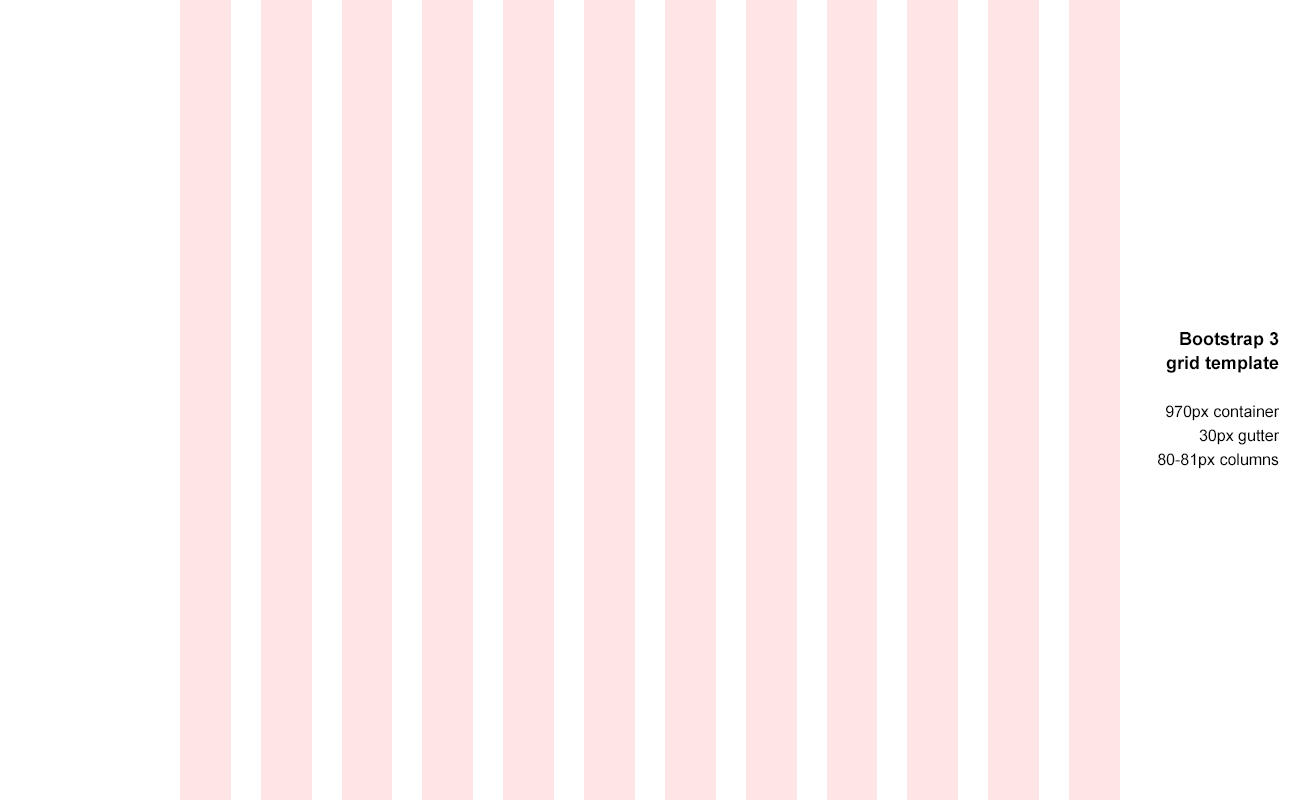
<style>
.page{position:relative;width:1300px;height:800px;background:#ffffff}
.page>*{position:absolute;margin:0}
.t1{font:16px/24px "ArialMT";color:#000000}
.t2{font:18px/24px "Arial-BoldMT";color:#000000}
</style>
<div class="page">
<p class="t1" style="left:1158px;top:332px;width:122px;height:137px;text-align:right"><span class="t2">Bootstrap 3<br>grid template<br><br></span>970px container<br>30px gutter<br>80-81px columns</p>
</div>
